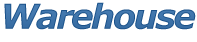
<style>
.page{position:relative;width:197px;height:42px;background:#ffffff}
.page>*{position:absolute;margin:0}
.t1{font:34.4px "Verdana-BoldItalic";letter-spacing:-0.075em;color:#396ea4}
</style>
<div class="page">
<p class="t1" style="left:4px;top:2px;width:192px;height:28px">Warehouse</p>
</div>
